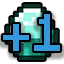
<style>
.page{position:relative;width:64px;height:64px;background:#ffffff}
.page>*{position:absolute;margin:0}
.t1{font:41.7px "Minecraftia-Regular";color:#3498db}
</style>
<div class="page">
<p class="t1" style="left:3px;top:14px;width:57px;height:37px">+1</p>
</div>
